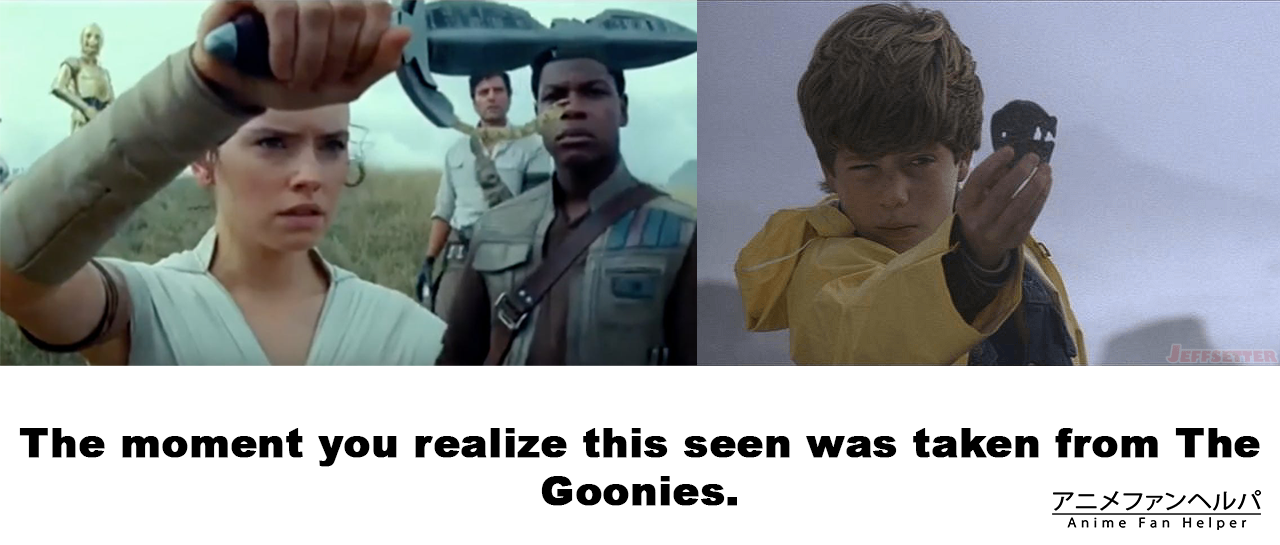
<style>
.page{position:relative;width:1280px;height:545px;background:#ffffff}
.page>*{position:absolute;margin:0}
.t1{font:40px "Arial-Black";color:#000000;font-weight:bold}
</style>
<div class="page">
<p class="t1" style="left:19px;top:428px;width:1241px;height:78px;text-align:center">The moment you realize this seen was taken from The Goonies.</p>
</div>
